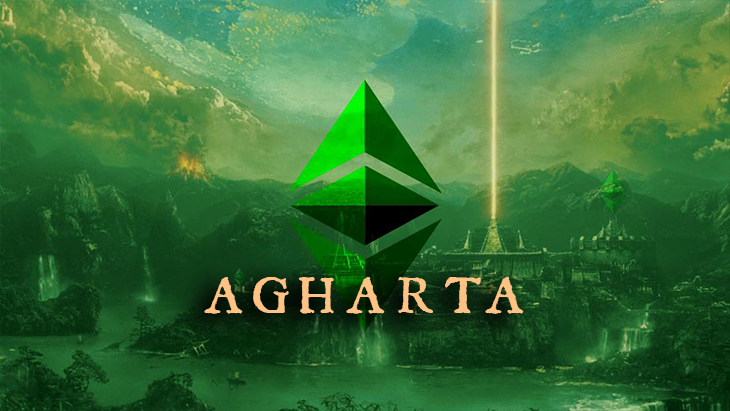
<style>
.page{position:relative;width:730px;height:411px}
.page>*{position:absolute;margin:0}
.t1{font:54.7px "JSL-Ancient";letter-spacing:0.2em;color:#fcc385}
.t2{font:54.7px "Roboto-Medium";letter-spacing:0.2em;color:#ffffff}
</style>
<div class="page">
<p class="t1" style="left:204px;top:277px;width:320px;height:37px"><span class="t2"><br></span>AGHARTA</p>
</div>
